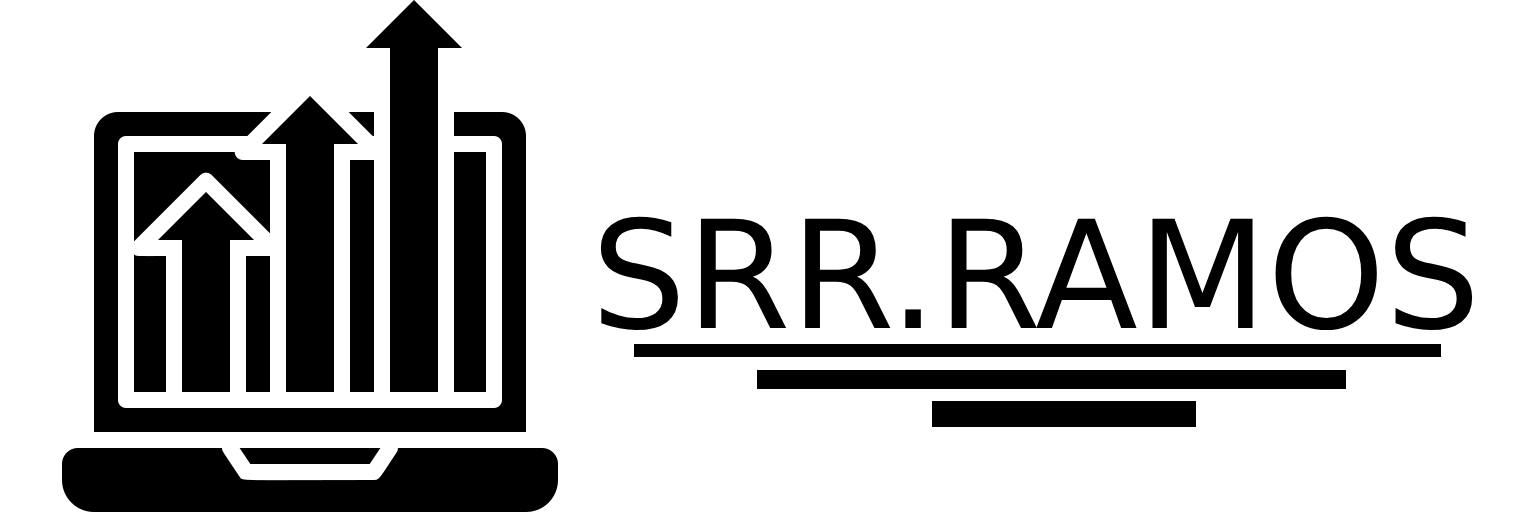
<style>
.page{position:relative;width:1536px;height:512px;background:#ffffff}
.page>*{position:absolute;margin:0}
.t1{font:150px "DejaVuSans";color:#000000}
</style>
<div class="page">
<p class="t1" style="left:600px;top:216px;width:873px;height:115px">SRR.RAMOS</p>
</div>
